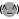
<style>
.page{position:relative;width:19px;height:19px;background:#ffffff}
.page>*{position:absolute;margin:0}
.t1{font:11px "MyriadPro-Regular";color:#000000}
.t2{font:10.3px "MyriadPro-Regular";color:#000000;scale:0.92 1}
</style>
<div class="page">
<p class="t1" style="left:0px;top:4px;width:19px;height:10px">(      )</p>
<p class="t2" style="left:2px;top:5px;width:15px;height:9px">^_^</p>
</div>
